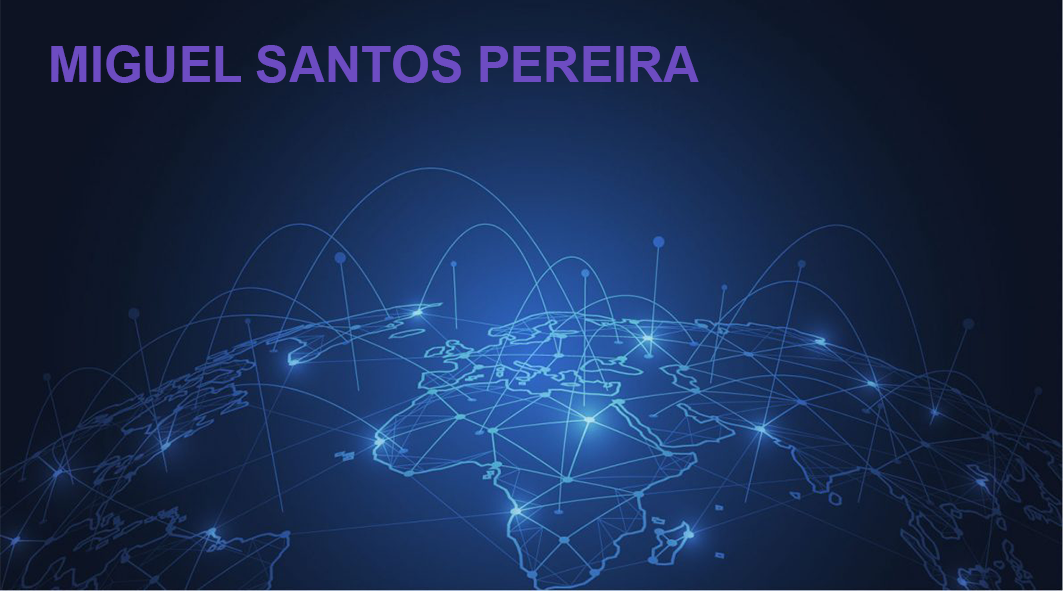
<style>
.page{position:relative;width:1063px;height:591px}
.page>*{position:absolute;margin:0}
.t1{font:50px "Arial-BoldMT";color:#6d4cc2}
</style>
<div class="page">
<p class="t1" style="left:51px;top:45px;width:648px;height:38px">MIGUEL SANTOS PEREIRA</p>
</div>
